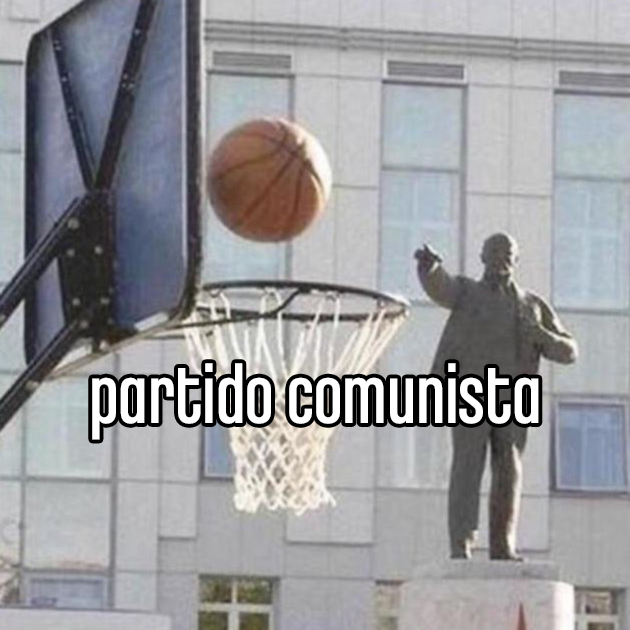
<style>
.page{position:relative;width:630px;height:630px}
.page>*{position:absolute;margin:0}
.t1{font:86.3px "ChaletComprime-CologneEighty";color:#ffffff}
</style>
<div class="page">
<p class="t1" style="left:92px;top:363px;width:447px;height:77px">partido comunista</p>
</div>
